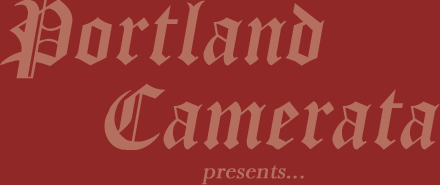
<style>
.page{position:relative;width:440px;height:185px;background:#902828}
.page>*{position:absolute;margin:0}
.t1{font:96px/84px "CloisterBlack-Light";color:#b56f5e;font-style:italic}
.t2{font:24px "Baskerville";color:#b56f5e;font-weight:bold;font-style:italic}
</style>
<div class="page">
<p class="t1" style="left:0px;top:0px;width:440px;height:151px;text-align:justify">Portland <br>Camerata</p>
<p class="t2" style="left:201px;top:165px;width:103px;height:20px">presents...</p>
</div>
